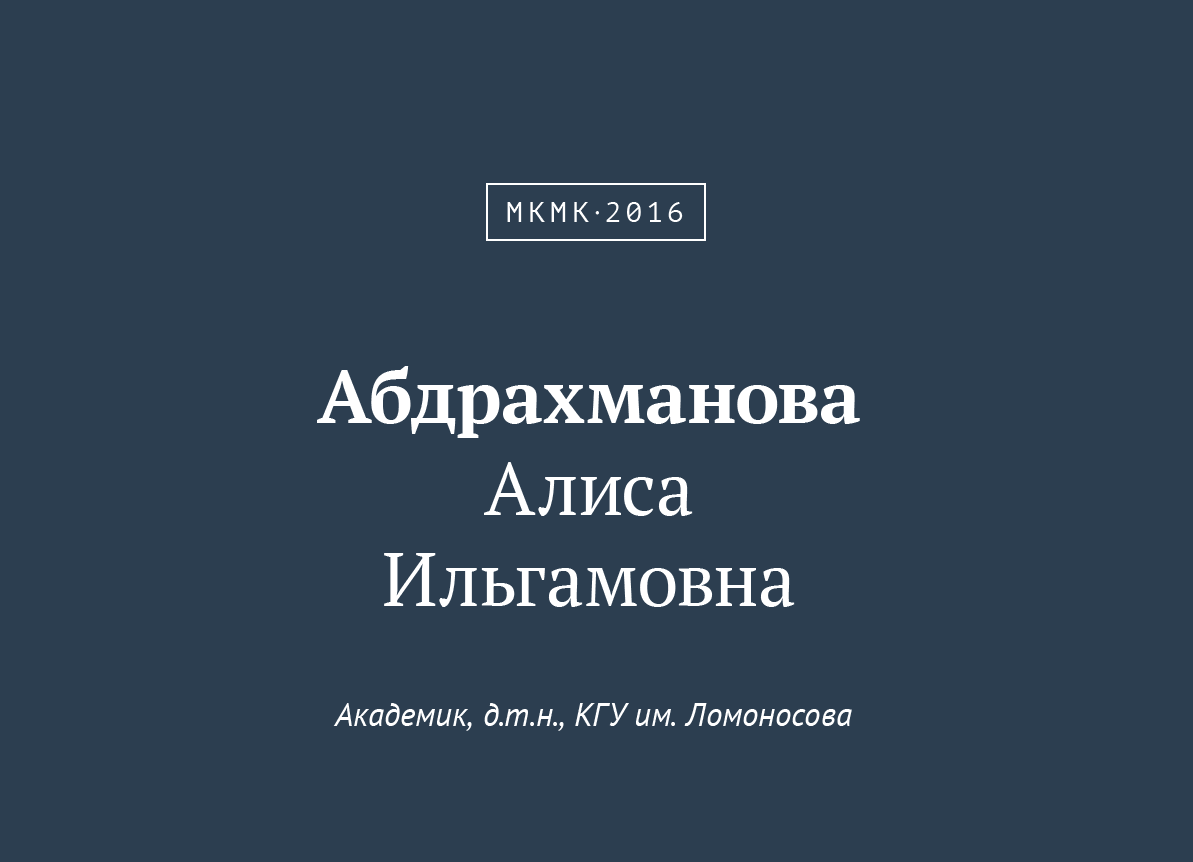
<style>
.page{position:relative;width:1193px;height:862px;background:#2c3e50}
.page>*{position:absolute;margin:0}
.t1{font:27.8px "PTMono-Regular";letter-spacing:0.2em;color:#ffffff;text-transform:uppercase}
.t2{font:27.8px "PTMono-Regular";letter-spacing:0.3em;color:#ffffff;text-transform:uppercase}
.t3{font:27.8px "MyriadPro-Regular";letter-spacing:0.3em;color:#ffffff;text-transform:uppercase}
.t4{font:75px/91.7px "PTSerif-Regular";color:#ffffff}
.t5{font:75px/91.7px "PTSerif-Bold";color:#ffffff}
.t6{font:33.3px "PTSans-Italic";color:#ffffff}
</style>
<div class="page">
<p class="t1" style="left:507px;top:202px;width:176px;height:20px">мкм<span class="t2">к</span><span class="t3">·</span>2016</p>
<p class="t4" style="left:317px;top:366px;width:543px;height:241px;text-align:center"><span class="t5">Абдрахманова<br></span>Алиса<br>Ильгамовна</p>
<p class="t6" style="left:333px;top:703px;width:519px;height:28px">Академик, д.т.н., КГУ им. Ломоносова</p>
</div>
